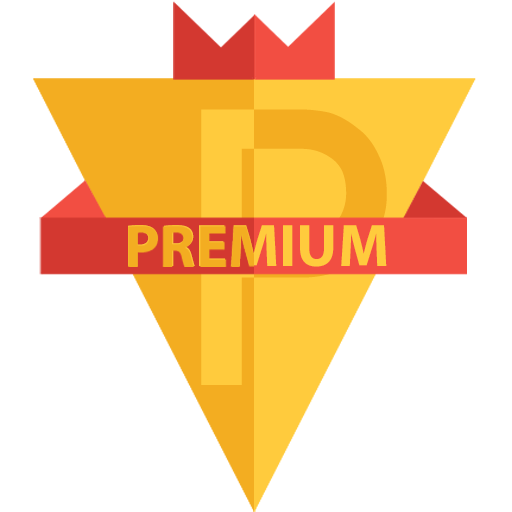
<style>
.page{position:relative;width:512px;height:512px;background:#ffffff}
.page>*{position:absolute;margin:0}
.t1{font:387.1px "DINAlternate-Bold"}
.t2{font:60.6px "MyriadPro-Bold"}
</style>
<div class="page">
<p class="t1" style="left:201px;top:109px;width:186px;height:276px">P</p>
<p class="t2" style="left:128px;top:225px;width:259px;height:42px">PREMIUM</p>
</div>
